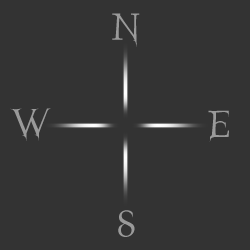
<style>
.page{position:relative;width:250px;height:250px;background:#333333}
.page>*{position:absolute;margin:0}
.t1{font:41.7px "Nosferatu";color:#9a9a9a}
</style>
<div class="page">
<p class="t1" style="left:112px;top:13px;width:28px;height:34px">N</p>
<p class="t1" style="left:10px;top:108px;width:41px;height:33px">W</p>
<p class="t1" style="left:208px;top:110px;width:21px;height:32px">E</p>
<p class="t1" style="left:118px;top:210px;width:17px;height:27px">S</p>
</div>
